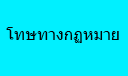
<style>
.page{position:relative;width:128px;height:76px;background:#00f0ff}
.page>*{position:absolute;margin:0}
.t1{font:15.6px "Tahoma";color:#000203}
</style>
<div class="page">
<p class="t1" style="left:6px;top:27px;width:113px;height:16px">โทษทางกฏหมาย</p>
</div>
